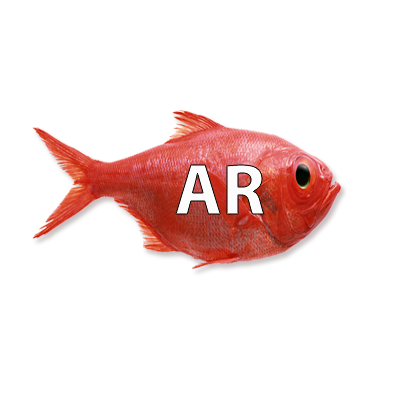
<style>
.page{position:relative;width:400px;height:400px;background:#ffffff}
.page>*{position:absolute;margin:0}
.t1{font:72px "MyriadPro-Bold";color:#fcfcfc}
</style>
<div class="page">
<p class="t1" style="left:176px;top:165px;width:88px;height:49px">AR</p>
</div>
